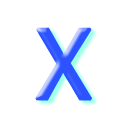
<style>
.page{position:relative;width:128px;height:128px;background:#ffffff}
.page>*{position:absolute;margin:0}
.t1{font:104px "MyriadPro-Regular";letter-spacing:-0.01em;color:#2b53ff;font-weight:bold}
</style>
<div class="page">
<p class="t1" style="left:35px;top:27px;width:57px;height:74px">X</p>
</div>
